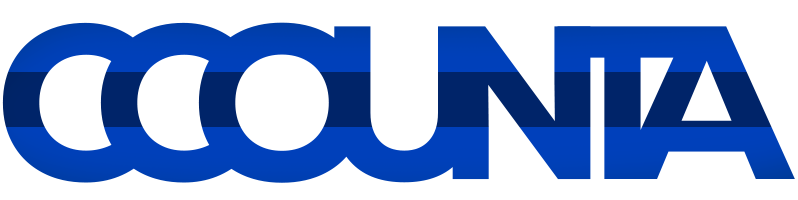
<style>
.page{position:relative;width:798px;height:200px;background:#ffffff}
.page>*{position:absolute;margin:0}
.t1{font:218px "Nexa-Heavy";letter-spacing:-0.24em;color:#003fb4;text-transform:uppercase}
.t2{font:218px "Nexa-Heavy";letter-spacing:-0.26em;color:#003fb4;text-transform:uppercase}
</style>
<div class="page">
<p class="t1" style="left:2px;top:22px;width:793px;height:161px">CCoun<span class="t2">ta</span></p>
</div>
